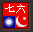
<style>
.page{position:relative;width:33px;height:32px;background:#f20000}
.page>*{position:absolute;margin:0}
.t1{font:10.4px "SimSun";color:#ffffff}
</style>
<div class="page">
<p class="t1" style="left:5px;top:4px;width:20px;height:9px">七六</p>
</div>
